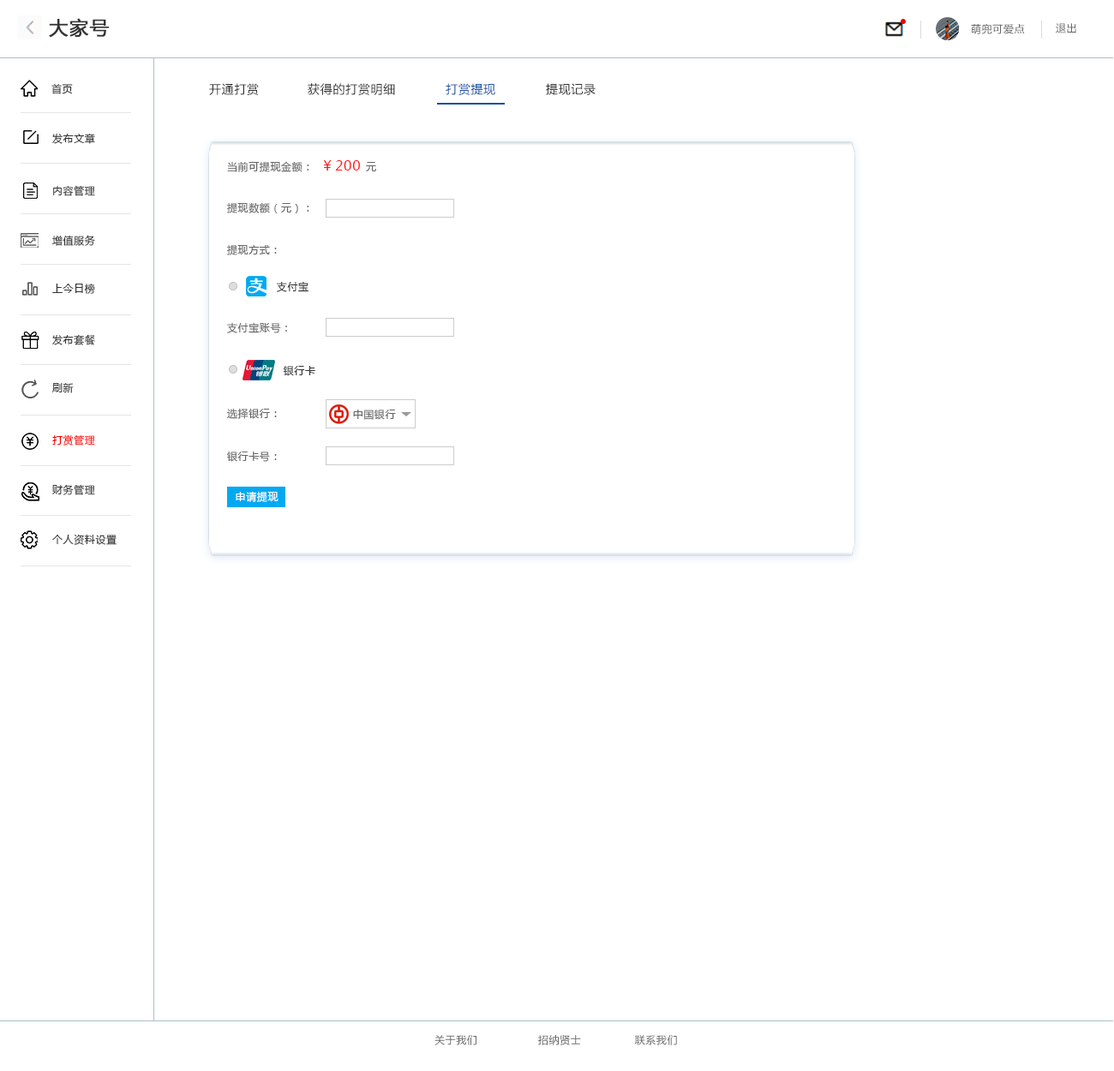
<style>
.page{position:relative;width:1114px;height:1071px;background:#ffffff}
.page>*{position:absolute;margin:0}
.t1{font:18.8px "MicrosoftYaHei";letter-spacing:0.05em;color:#333333;font-weight:bold}
.t2{font:10.3px "MicrosoftYaHei";letter-spacing:0.05em;color:#666666}
.t3{font:10.3px "MicrosoftYaHei";letter-spacing:0.05em;color:#333333}
.t4{font:12px "MicrosoftYaHei";letter-spacing:0.05em;color:#333333}
.t5{font:12px "MicrosoftYaHei";letter-spacing:0.05em;color:#144ea4}
.t6{font:13.7px "MicrosoftYaHei";letter-spacing:0.05em;color:#ff1a1a}
.t7{font:10.3px "MicrosoftYaHei";letter-spacing:0.05em;color:#ff0000}
.t8{font:10.3px "MicrosoftYaHei";letter-spacing:0.05em;color:#ffffff}
</style>
<div class="page">
<p class="t1" style="left:49px;top:18px;width:60px;height:20px">大家号</p>
<p class="t2" style="left:971px;top:24px;width:54px;height:10px">萌兜可爱点</p>
<p class="t2" style="left:1055px;top:23px;width:21px;height:10px">退出</p>
<p class="t3" style="left:51px;top:83px;width:22px;height:11px">首页</p>
<p class="t4" style="left:209px;top:83px;width:50px;height:12px">开通打赏</p>
<p class="t4" style="left:308px;top:83px;width:87px;height:12px">获得的打赏明细</p>
<p class="t5" style="left:445px;top:83px;width:50px;height:12px">打赏提现</p>
<p class="t4" style="left:546px;top:83px;width:49px;height:12px">提现记录</p>
<p class="t3" style="left:52px;top:133px;width:43px;height:11px">发布文章</p>
<p class="t2" style="left:227px;top:160px;width:149px;height:12px">当前可提现金额：  <span class="t6">￥200 </span>元</p>
<p class="t3" style="left:53px;top:185px;width:42px;height:11px">内容管理</p>
<p class="t2" style="left:227px;top:202px;width:82px;height:11px">提现数额（元）：</p>
<p class="t3" style="left:52px;top:235px;width:43px;height:11px">增值服务</p>
<p class="t2" style="left:227px;top:244px;width:50px;height:11px">提现方式：</p>
<p class="t3" style="left:276px;top:281px;width:32px;height:11px">支付宝</p>
<p class="t3" style="left:52px;top:283px;width:43px;height:11px">上今日榜</p>
<p class="t2" style="left:227px;top:322px;width:60px;height:11px">支付宝账号：</p>
<p class="t3" style="left:52px;top:334px;width:43px;height:11px">发布套餐</p>
<p class="t3" style="left:283px;top:366px;width:32px;height:10px">银行卡</p>
<p class="t3" style="left:52px;top:383px;width:22px;height:10px">刷新</p>
<p class="t2" style="left:227px;top:408px;width:50px;height:11px">选择银行：</p>
<p class="t2" style="left:353px;top:409px;width:43px;height:11px">中国银行</p>
<p class="t7" style="left:52px;top:434px;width:43px;height:11px">打赏管理</p>
<p class="t2" style="left:227px;top:451px;width:50px;height:11px">银行卡号：</p>
<p class="t3" style="left:52px;top:484px;width:43px;height:11px">财务管理</p>
<p class="t8" style="left:236px;top:491px;width:42px;height:11px">申请提现</p>
<p class="t3" style="left:52px;top:534px;width:65px;height:11px">个人资料设置</p>
<p class="t2" style="left:434px;top:1035px;width:243px;height:10px">关于我们                 招纳贤士               联系我们</p>
</div>
